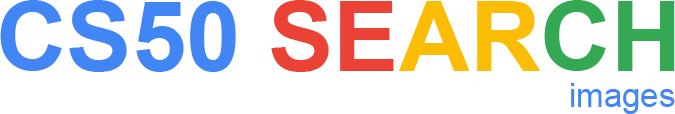
<style>
.page{position:relative;width:675px;height:114px;background:#ffffff}
.page>*{position:absolute;margin:0}
.t1{font:98px "Arial-BoldMT";color:#4285f4;text-transform:uppercase}
.t2{font:98px "Arial-BoldMT";color:#ea4335;text-transform:uppercase}
.t3{font:98px "Arial-BoldMT";color:#fbbc05;text-transform:uppercase}
.t4{font:98px "Arial-BoldMT";color:#34a853;text-transform:uppercase}
.t5{font:33px "ArialMT";color:#4285f4}
</style>
<div class="page">
<p class="t1" style="left:0px;top:0px;width:675px;height:72px">cs50 <span class="t2">se</span><span class="t3">ar</span><span class="t4">ch</span></p>
<p class="t5" style="left:571px;top:83px;width:104px;height:31px">images</p>
</div>
